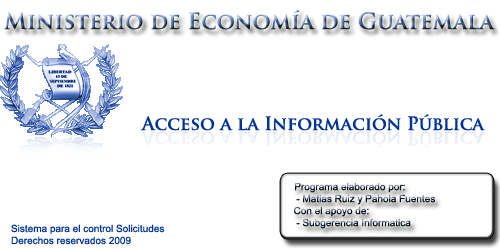
<style>
.page{position:relative;width:500px;height:250px;background:#ffffff}
.page>*{position:absolute;margin:0}
.t1{font:22px "TrajanPro-Bold"}
.t2{font:18px "TrajanPro-Bold";color:#003399}
.t3{font:10px "ArialMT"}
.t4{font:10px "ArialMT";color:#003399}
</style>
<div class="page">
<p class="t1" style="left:4px;top:9px;width:491px;height:21px">Ministerio de Economía de Guatemala</p>
<p class="t2" style="left:140px;top:114px;width:345px;height:17px">Acceso a la Información Pública</p>
<p class="t3" style="left:294px;top:183px;width:141px;height:46px">Programa elaborado por:<br>   - Matias Ruiz y Pahola Fuentes<br>  Con el apoyo de:<br>   - Subgerencia Informatica</p>
<p class="t4" style="left:11px;top:224px;width:153px;height:21px">Sistema para el control Solicitudes<br>Derechos reservados 2009</p>
</div>
